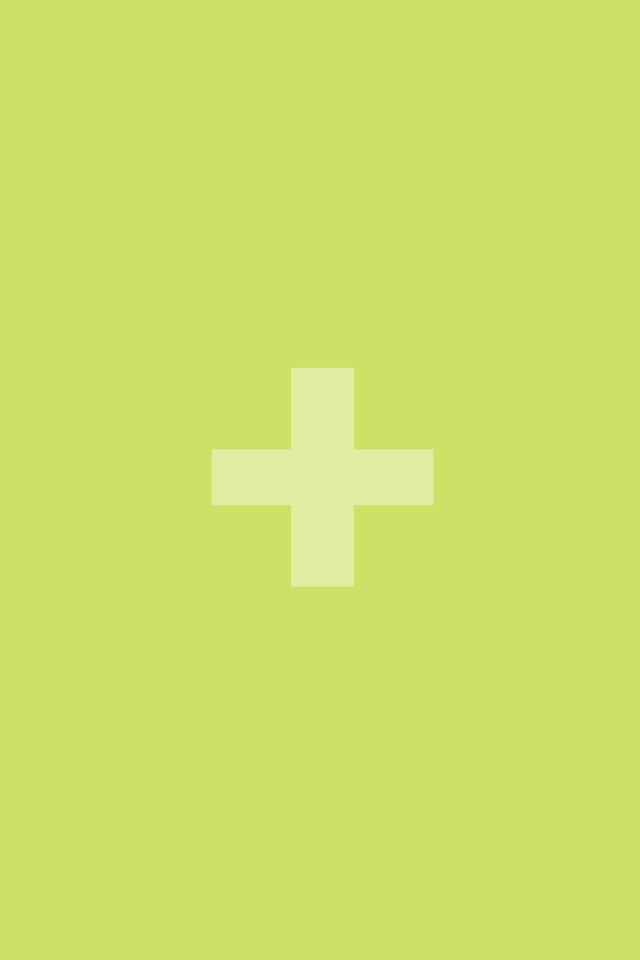
<style>
.page{position:relative;width:640px;height:960px;background:#cce266}
.page>*{position:absolute;margin:0}
.t1{font:453.3px "Montserrat-Bold";letter-spacing:0.1em;color:#e0eea3}
</style>
<div class="page">
<p class="t1" style="left:211px;top:367px;width:223px;height:220px">+</p>
</div>
